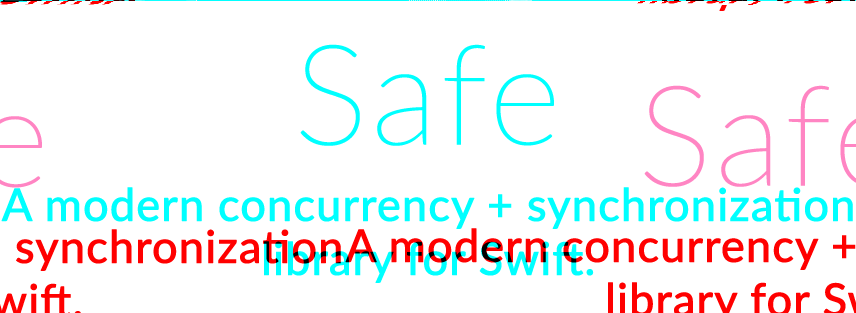
<style>
.page{position:relative;width:856px;height:313px;background:#ffffff}
.page>*{position:absolute;margin:0}
.t1{font:140px "Lato-Thin";color:#00ffff;font-weight:bold}
.t2{font:45px "Lato-Medium";color:#00ffff;font-weight:bold}
</style>
<div class="page">
<p class="t1" style="left:300px;top:43px;width:254px;height:102px">Safe</p>
<p class="t2" style="left:1px;top:186px;width:852px;height:96px;text-align:center">A modern concurrency + synchronization<br>library for Swift.</p>
</div>
